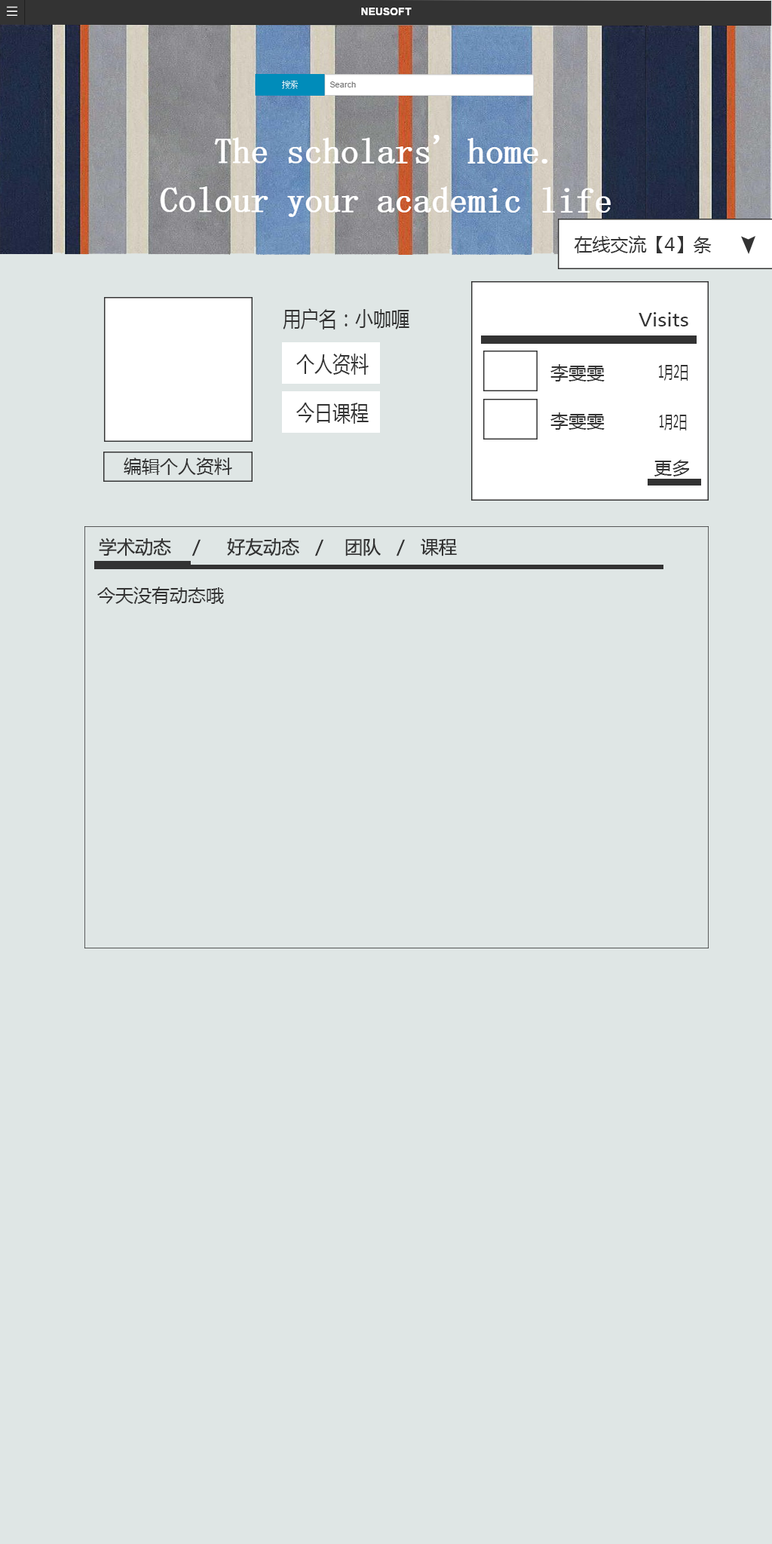
<style>
.page{position:relative;width:772px;height:1544px;background:#dfe6e5}
.page>*{position:absolute;margin:0}
.t1{font:18.1px "MicrosoftYaHei";color:#333333}
.t2{font:21.7px "MicrosoftYaHei";color:#333333;scale:0.83 1}
.t3{font:18.3px "MicrosoftYaHei";color:#333333;scale:1.1 1}
.t4{font:16.3px "MicrosoftYaHei";color:#333333;scale:0.6 1}
.t5{font:16.9px "MicrosoftYaHei";color:#333333;scale:0.53 1}
</style>
<div class="page">
<p class="t1" style="left:574px;top:235px;width:138px;height:18px">在线交流【4】条</p>
<p class="t2" style="left:283px;top:308px;width:126px;height:22px">用户名：小咖喱</p>
<p class="t3" style="left:639px;top:312px;width:49px;height:15px">Visits</p>
<p class="t2" style="left:296px;top:354px;width:73px;height:21px">个人资料</p>
<p class="t1" style="left:550px;top:364px;width:55px;height:18px">李雯雯</p>
<p class="t4" style="left:659px;top:365px;width:29px;height:16px">1月2日</p>
<p class="t2" style="left:296px;top:403px;width:73px;height:21px">今日课程</p>
<p class="t1" style="left:550px;top:412px;width:55px;height:18px">李雯雯</p>
<p class="t5" style="left:659px;top:415px;width:28px;height:16px">1月2日</p>
<p class="t1" style="left:124px;top:458px;width:108px;height:17px">编辑个人资料</p>
<p class="t1" style="left:654px;top:460px;width:35px;height:17px">更多</p>
<p class="t1" style="left:99px;top:538px;width:358px;height:18px">学术动态    /     好友动态   /    团队   /   课程</p>
<p class="t1" style="left:97px;top:587px;width:127px;height:17px">今天没有动态哦</p>
</div>
